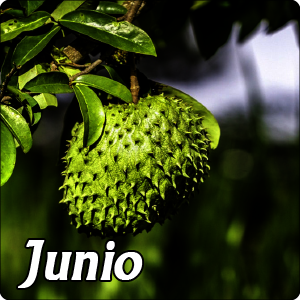
<style>
.page{position:relative;width:300px;height:300px}
.page>*{position:absolute;margin:0}
.t1{font:55.6px "Narkisim";color:#ffffff;font-weight:bold;font-style:italic}
</style>
<div class="page">
<p class="t1" style="left:18px;top:240px;width:125px;height:48px">Junio</p>
</div>
